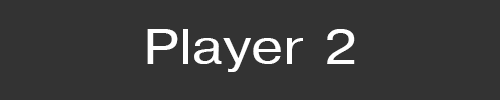
<style>
.page{position:relative;width:500px;height:100px;background:#333333}
.page>*{position:absolute;margin:0}
.t1{font:48px "Helvetica";color:#ffffff;scale:1.2 1}
</style>
<div class="page">
<p class="t1" style="left:147px;top:29px;width:208px;height:43px">Player 2</p>
</div>
